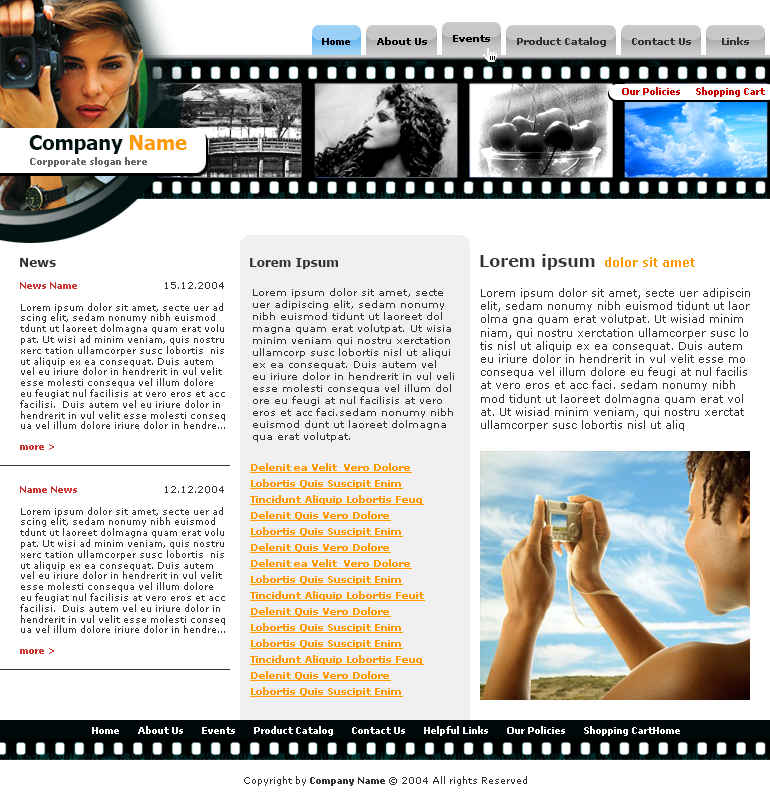
<style>
.page{position:relative;width:770px;height:800px;background:#ffffff}
.page>*{position:absolute;margin:0}
.t1{font:10px "Tahoma-Bold";color:#000000}
.t2{font:10px "Verdana-Bold";color:#000000}
.t3{font:10px "Verdana-Bold";color:#333333}
.t4{font:9px "Verdana-Bold";color:#cc0000}
.t5{font:20px "Tahoma-Bold";color:#001312}
.t6{font:20px "Tahoma-Bold";color:#ff9900}
.t7{font:10px "Tahoma-Bold";color:#666666}
.t8{font:16px "Verdana-Bold";color:#333333}
.t9{font:12px "Verdana-Bold";color:#ff9900}
.t10{font:12px "Verdana-Bold";color:#333333}
.t11{font:9px "Verdana";color:#333333}
.t12{font:9px "Verdana-Bold";color:#cc3333}
.t13{font:10px "Verdana";color:#333333}
.t14{font:11px "Verdana";color:#333333}
.t15{font:10px/16px "Verdana-Bold";color:#ff9900;text-decoration:underline}
.t16{font:9px "Verdana-Bold";color:#ffffff}
.t17{font:9px "Verdana-Bold";color:#333333}
</style>
<div class="page">
<p class="t1" style="left:322px;top:38px;width:28px;height:7px">Home</p>
<p class="t2" style="left:377px;top:37px;width:50px;height:8px">About Us</p>
<p class="t2" style="left:453px;top:35px;width:37px;height:7px">Events</p>
<p class="t3" style="left:517px;top:37px;width:89px;height:10px">Product Catalog</p>
<p class="t3" style="left:632px;top:38px;width:59px;height:7px">Contact Us</p>
<p class="t3" style="left:722px;top:37px;width:27px;height:8px">Links</p>
<p class="t4" style="left:622px;top:87px;width:143px;height:10px">Our Policies     Shopping Cart</p>
<p class="t5" style="left:29px;top:135px;width:158px;height:19px">Company <span class="t6">Name</span></p>
<p class="t7" style="left:30px;top:157px;width:117px;height:10px">Corpporate slogan here</p>
<p class="t8" style="left:480px;top:254px;width:115px;height:16px">Lorem ipsum</p>
<p class="t9" style="left:605px;top:257px;width:90px;height:10px">dolor sit amet</p>
<p class="t10" style="left:20px;top:258px;width:36px;height:9px">News</p>
<p class="t10" style="left:250px;top:258px;width:89px;height:11px">Lorem Ipsum</p>
<p class="t11" style="left:20px;top:282px;width:205px;height:147px"><span class="t12">News Name<br></span><br>Lorem ipsum dolor sit amet, secte uer ad<br>scing elit, sedam nonumy nibh euismod <br>tdunt ut laoreet dolmagna quam erat volu<br>pat. Ut wisi ad minim veniam, quis nostru <br>xerc tation ullamcorper susc lobortis  nis<br>ut aliquip ex ea consequat. Duis autem <br>vel eu iriure dolor in hendrerit in vul velit <br>esse molesti consequa vel illum dolore <br>eu feugiat nul facilisis at vero eros et acc<br>facilisi.  Duis autem vel eu iriure dolor in <br>hendrerit in vul velit esse molesti conseq<br>ua vel illum dolore iriure dolor in hendre...</p>
<p class="t11" style="left:165px;top:282px;width:59px;height:7px">15.12.2004</p>
<p class="t13" style="left:253px;top:288px;width:201px;height:154px">Lorem ipsum dolor sit amet, secte <br>uer adipiscing elit, sedam nonumy <br>nibh euismod tidunt ut laoreet dol<br>magna quam erat volutpat. Ut wisia<br>minim veniam qui nostru xerctation <br>ullamcorp susc lobortis nisl ut aliqui <br>ex ea consequat. Duis autem vel <br>eu iriure dolor in hendrerit in vul veli<br>esse molesti consequa vel illum dol<br>ore eu feugi at nul facilisis at vero <br>eros et acc faci.sedam nonumy nibh <br>euismod dunt ut laoreet dolmagna <br>qua erat volutpat.</p>
<p class="t14" style="left:480px;top:288px;width:270px;height:143px">Lorem ipsum dolor sit amet, secte uer adipiscin<br>elit, sedam nonumy nibh euismod tidunt ut laor <br>olma gna quam erat volutpat. Ut wisiad minim <br>niam, qui nostru xerctation ullamcorper susc lo<br>tis nisl ut aliquip ex ea consequat. Duis autem <br>eu iriure dolor in hendrerit in vul velit esse mo <br>consequa vel illum dolore eu feugi at nul facilis <br>at vero eros et acc faci. sedam nonumy nibh <br>mod tidunt ut laoreet dolmagna quam erat vol<br>at. Ut wisiad minim veniam, qui nostru xerctat<br>ullamcorper susc lobortis nisl ut aliq</p>
<p class="t12" style="left:20px;top:444px;width:34px;height:6px">more &gt;</p>
<p class="t15" style="left:250px;top:463px;width:175px;height:234px">Delenit ea Velit  Vero Dolore<br>Lobortis Quis Suscipit Enim<br>Tincidunt Aliquip Lobortis Feug<br>Delenit Quis Vero Dolore<br>Lobortis Quis Suscipit Enim<br>Delenit Quis Vero Dolore<br>Delenit ea Velit  Vero Dolore<br>Lobortis Quis Suscipit Enim<br>Tincidunt Aliquip Lobortis Feuit<br>Delenit Quis Vero Dolore<br>Lobortis Quis Suscipit Enim<br>Lobortis Quis Suscipit Enim<br>Tincidunt Aliquip Lobortis Feug<br>Delenit Quis Vero Dolore<br>Lobortis Quis Suscipit Enim</p>
<p class="t11" style="left:20px;top:486px;width:205px;height:147px"><span class="t12">Name News<br></span><br>Lorem ipsum dolor sit amet, secte uer ad<br>scing elit, sedam nonumy nibh euismod <br>tdunt ut laoreet dolmagna quam erat volu<br>pat. Ut wisi ad minim veniam, quis nostru <br>xerc tation ullamcorper susc lobortis  nis<br>ut aliquip ex ea consequat. Duis autem <br>vel eu iriure dolor in hendrerit in vul velit <br>esse molesti consequa vel illum dolore <br>eu feugiat nul facilisis at vero eros et acc<br>facilisi.  Duis autem vel eu iriure dolor in <br>hendrerit in vul velit esse molesti conseq<br>ua vel illum dolore iriure dolor in hendre...</p>
<p class="t11" style="left:165px;top:486px;width:59px;height:7px">12.12.2004</p>
<p class="t12" style="left:20px;top:648px;width:34px;height:6px">more &gt;</p>
<p class="t16" style="left:92px;top:726px;width:588px;height:10px">Home      About Us      Events      Product Catalog      Contact Us      Helpful Links      Our Policies      Shopping CartHome</p>
<p class="t11" style="left:244px;top:776px;width:283px;height:10px">Copyright by<span class="t17"> Company Name © </span>2004 All rights Reserved</p>
</div>
